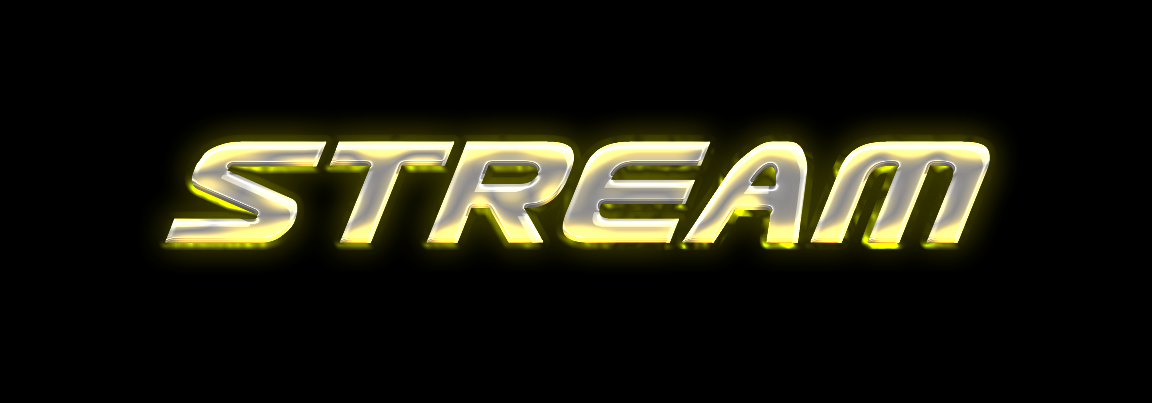
<style>
.page{position:relative;width:1152px;height:403px;background:#000000}
.page>*{position:absolute;margin:0}
.t1{font:172px "UsuziItalic";letter-spacing:-0.025em;font-weight:bold}
</style>
<div class="page">
<p class="t1" style="left:165px;top:141px;width:825px;height:102px">stream</p>
<p class="t1" style="left:165px;top:141px;width:825px;height:102px">stream</p>
<p class="t1" style="left:165px;top:141px;width:825px;height:102px">stream</p>
<p class="t1" style="left:165px;top:141px;width:825px;height:102px">stream</p>
</div>
